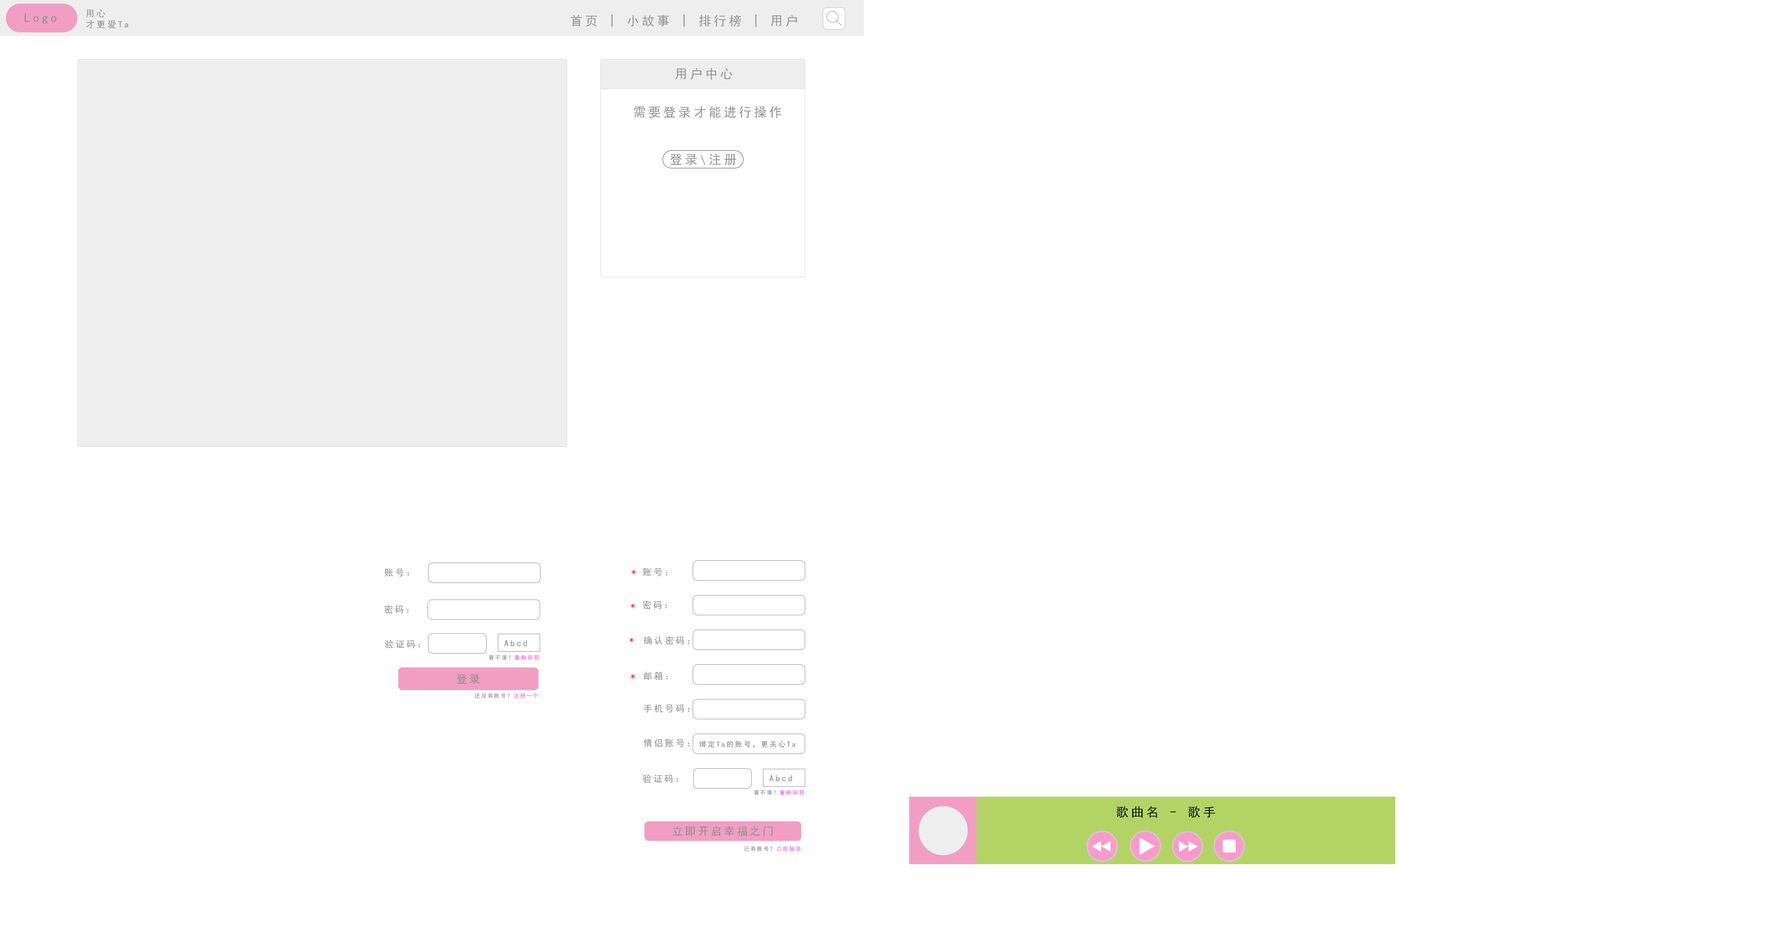
<style>
.page{position:relative;width:1786px;height:947px;background:#ffffff}
.page>*{position:absolute;margin:0}
.t1{font:12.6px "SimHei";letter-spacing:0.2em;color:#919090}
.t2{font:9px/10.8px "SimHei";letter-spacing:0.2em;color:#919090}
.t3{font:9px "SimHei";letter-spacing:0.2em;color:#919090}
.t4{font:9px "SimHei";letter-spacing:0.2em;color:#ff0000}
.t5{font:5.4px "SimHei";letter-spacing:0.2em;color:#919090}
.t6{font:5.4px "SimHei";letter-spacing:0.2em;color:#fd5cf4}
.t7{font:7.2px "SimHei";letter-spacing:0.2em;color:#919090}
.t8{font:12.6px "SimHei";letter-spacing:0.2em;color:#000000}
</style>
<div class="page">
<p class="t1" style="left:24px;top:13px;width:33px;height:11px">Logo</p>
<p class="t2" style="left:86px;top:9px;width:42px;height:20px">用心<br>才更爱Ta</p>
<p class="t1" style="left:571px;top:14px;width:226px;height:13px">首页 | 小故事 | 排行榜 | 用户</p>
<p class="t1" style="left:675px;top:68px;width:57px;height:12px">用户中心</p>
<p class="t1" style="left:634px;top:106px;width:147px;height:12px">需要登录才能进行操作</p>
<p class="t3" style="left:384px;top:568px;width:25px;height:9px">账号：</p>
<p class="t4" style="left:631px;top:570px;width:5px;height:4px">*</p>
<p class="t3" style="left:643px;top:567px;width:24px;height:9px">账号：</p>
<p class="t3" style="left:384px;top:605px;width:25px;height:9px">密码：</p>
<p class="t4" style="left:630px;top:603px;width:5px;height:5px">*</p>
<p class="t3" style="left:643px;top:600px;width:24px;height:9px">密码：</p>
<p class="t3" style="left:385px;top:639px;width:35px;height:9px">验证码：</p>
<p class="t3" style="left:504px;top:640px;width:23px;height:6px">Abcd</p>
<p class="t4" style="left:629px;top:638px;width:5px;height:4px">*</p>
<p class="t3" style="left:643px;top:636px;width:46px;height:9px">确认密码：</p>
<p class="t5" style="left:489px;top:655px;width:50px;height:5px">看不清？<span class="t6">重新获取</span></p>
<p class="t4" style="left:630px;top:674px;width:5px;height:5px">*</p>
<p class="t3" style="left:644px;top:671px;width:24px;height:9px">邮箱：</p>
<p class="t5" style="left:474px;top:693px;width:64px;height:5px">还没有账号？<span class="t6">注册一个</span></p>
<p class="t3" style="left:644px;top:704px;width:45px;height:9px">手机号码：</p>
<p class="t3" style="left:643px;top:738px;width:46px;height:9px">情侣账号：</p>
<p class="t7" style="left:699px;top:740px;width:96px;height:8px">绑定Ta的账号，更关心Ta</p>
<p class="t3" style="left:643px;top:774px;width:35px;height:9px">验证码：</p>
<p class="t3" style="left:769px;top:775px;width:23px;height:6px">Abcd</p>
<p class="t5" style="left:754px;top:790px;width:50px;height:5px">看不清？<span class="t6">重新获取</span></p>
<p class="t8" style="left:1116px;top:806px;width:99px;height:12px">歌曲名 - 歌手</p>
<p class="t5" style="left:744px;top:846px;width:57px;height:5px">已有账号？<span class="t6">立即登录</span></p>
</div>
